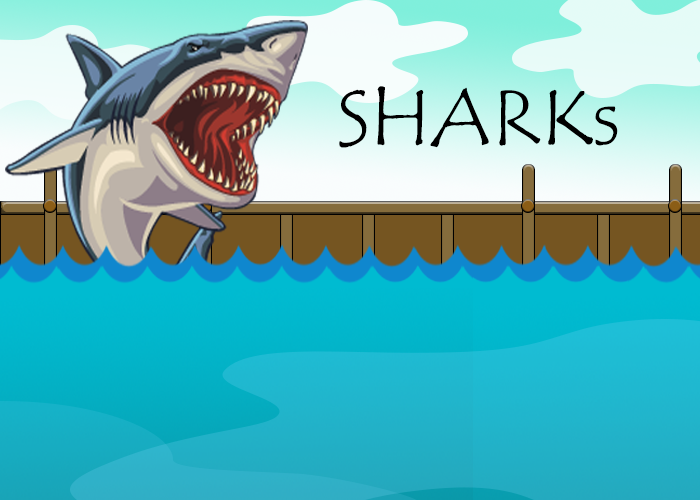
<style>
.page{position:relative;width:700px;height:500px}
.page>*{position:absolute;margin:0}
.t1{font:80px "TempusSansITC";color:#0c0c0c}
</style>
<div class="page">
<p class="t1" style="left:339px;top:86px;width:279px;height:62px">SHARKs</p>
</div>
